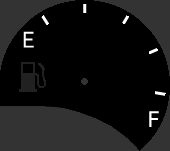
<style>
.page{position:relative;width:170px;height:151px;background:#000000}
.page>*{position:absolute;margin:0}
.t1{font:24px "Corbel";letter-spacing:0.1em;color:#ffffff}
</style>
<div class="page">
<p class="t1" style="left:23px;top:31px;width:11px;height:17px">E</p>
<p class="t1" style="left:149px;top:111px;width:10px;height:16px">F</p>
</div>
